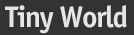
<style>
.page{position:relative;width:134px;height:35px;background:#333333}
.page>*{position:absolute;margin:0}
.t1{font:30px "OfficinaSansLT-Bold";letter-spacing:-0.05em;color:#e5e5e5}
</style>
<div class="page">
<p class="t1" style="left:5px;top:5px;width:122px;height:29px">Tiny World</p>
</div>
